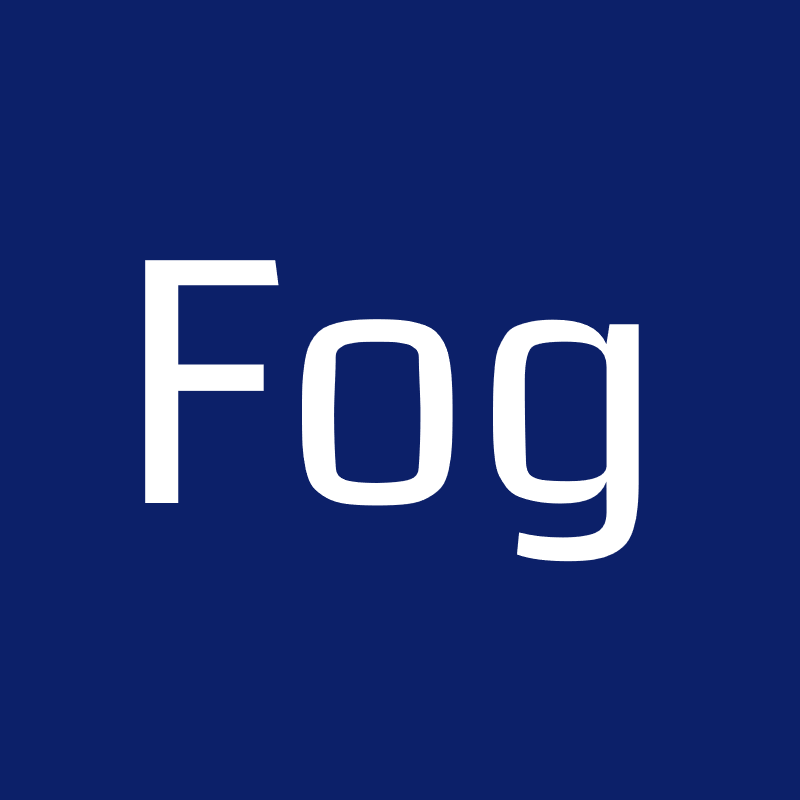
<style>
.page{position:relative;width:800px;height:800px;background:#0c2069}
.page>*{position:absolute;margin:0}
.t1{font:333.8px "Coda-Regular";color:#ffffff}
</style>
<div class="page">
<p class="t1" style="left:145px;top:260px;width:494px;height:302px">Fog</p>
</div>
